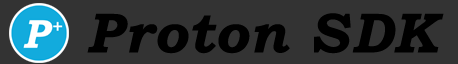
<style>
.page{position:relative;width:458px;height:64px;background:#333333}
.page>*{position:absolute;margin:0}
.t1{font:56.4px "BookmanOldStyle-BoldItalic";letter-spacing:0.02em;color:#000000}
</style>
<div class="page">
<p class="t1" style="left:87px;top:13px;width:357px;height:41px">Proton SDK</p>
</div>
